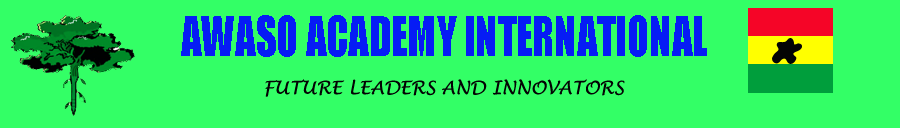
<style>
.page{position:relative;width:900px;height:128px;background:#33ff66}
.page>*{position:absolute;margin:0}
.t1{font:50.6px "Impact";color:#071cf6;scale:0.8 1}
.t2{font:18px "LucidaHandwriting-Italic";color:#040404}
</style>
<div class="page">
<p class="t1" style="left:181px;top:15px;width:526px;height:42px">AWASO ACADEMY INTERNATIONAL</p>
<p class="t2" style="left:265px;top:79px;width:360px;height:18px">FUTURE LEADERS AND INNOVATORS</p>
</div>
